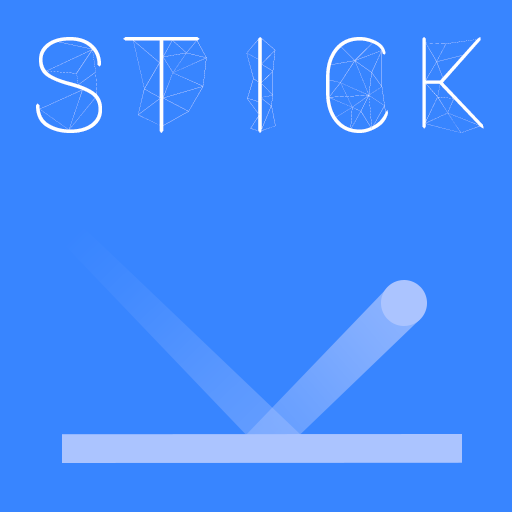
<style>
.page{position:relative;width:512px;height:512px;background:#3885ff}
.page>*{position:absolute;margin:0}
.t1{font:96px "Amethyst";color:#ffffff}
</style>
<div class="page">
<p class="t1" style="left:36px;top:37px;width:448px;height:96px">STICK</p>
</div>
